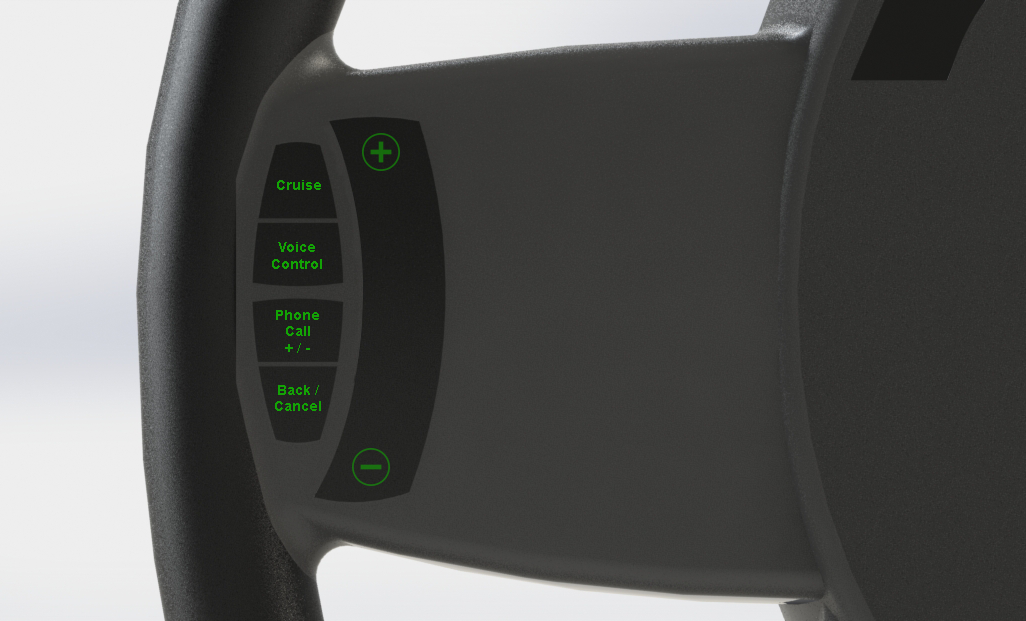
<style>
.page{position:relative;width:1026px;height:621px}
.page>*{position:absolute;margin:0}
.t1{font:14px "Arial-BoldMT";color:#13a305}
</style>
<div class="page">
<p class="t1" style="left:277px;top:180px;width:44px;height:10px">Cruise</p>
<p class="t1" style="left:272px;top:242px;width:50px;height:27px;text-align:center">Voice<br>Control</p>
<p class="t1" style="left:276px;top:310px;width:43px;height:43px;text-align:center">Phone<br>Call<br>+ / -</p>
<p class="t1" style="left:275px;top:385px;width:46px;height:26px;text-align:center">Back /<br>Cancel</p>
</div>
